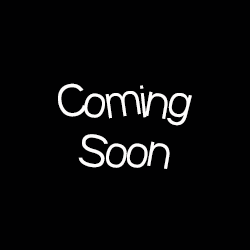
<style>
.page{position:relative;width:250px;height:250px;background:#010102}
.page>*{position:absolute;margin:0}
.t1{font:41.7px "SFBeaverton-Light";color:#fefdfc}
</style>
<div class="page">
<p class="t1" style="left:58px;top:83px;width:134px;height:86px;text-align:center">Coming<br>Soon</p>
</div>
